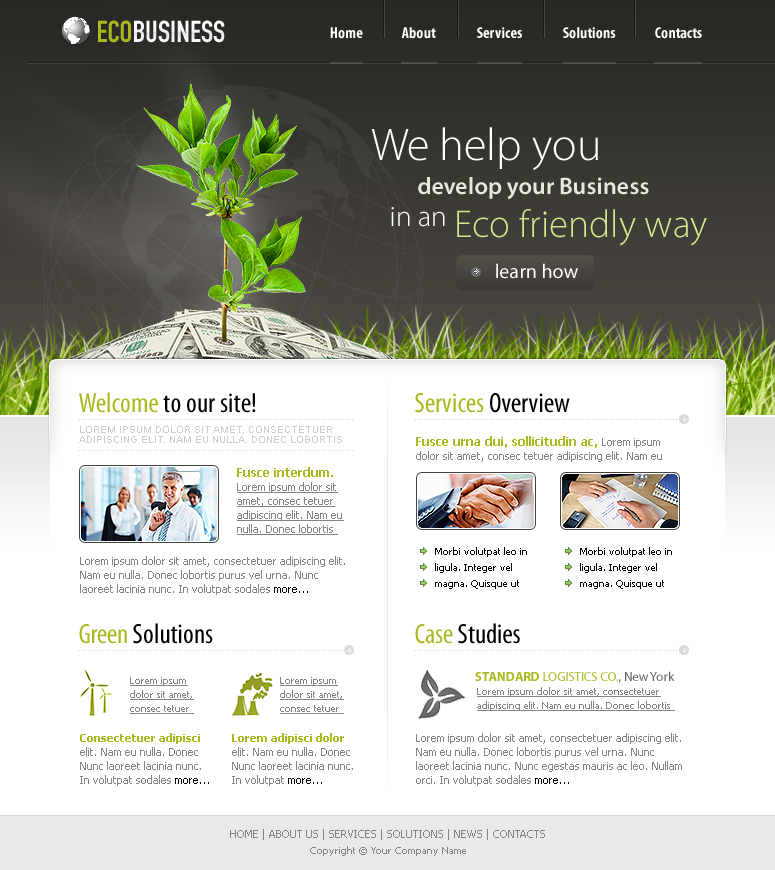
<style>
.page{position:relative;width:775px;height:870px;background:#ffffff}
.page>*{position:absolute;margin:0}
.t1{font:30px "DINEngschriftStd";color:#ffffff}
.t2{font:30px "DINEngschriftStd";color:#abb820}
.t3{font:16px "MyriadPro-BoldCond";color:#ffffff}
.t4{font:46px "MyriadPro-Light";color:#ffffff}
.t5{font:24px "MyriadPro-Semibold";color:#e7eada}
.t6{font:29px "MyriadPro-Light";color:#ffffff}
.t7{font:39px "MyriadPro-Light";color:#d5e88e}
.t8{font:20px "MyriadPro-Regular";color:#ffffff}
.t9{font:28px "MyriadPro-Cond";color:#000000}
.t10{font:28px "MyriadPro-Cond";color:#abb820}
.t11{font:10px "ArialMT";color:#cdcdcd;text-transform:uppercase}
.t12{font:11px/14px "Tahoma";color:#848484}
.t13{font:12px/14px "Tahoma-Bold";color:#abb820}
.t14{font:11px/14px "Tahoma";color:#848484;text-decoration:underline}
.t15{font:11px/14px "Tahoma";color:#000000}
.t16{font:10px/16px "Tahoma";color:#000000}
.t17{font:10px/14px "Tahoma";color:#848484;text-decoration:underline}
.t18{font:13px "MyriadPro-Regular";color:#abb820}
.t19{font:13px "MyriadPro-Bold";color:#abb820}
.t20{font:13px "MyriadPro-Regular";color:#606060}
.t21{font:11px/14px "Tahoma-Bold";color:#abb820}
.t22{font:11px/16px "Tahoma";color:#848484}
.t23{font:10px/16px "Tahoma";color:#848484}
</style>
<div class="page">
<p class="t1" style="left:98px;top:20px;width:127px;height:23px"><span class="t2">ECO</span>BUSINESS</p>
<p class="t3" style="left:330px;top:27px;width:33px;height:12px">Home</p>
<p class="t3" style="left:401px;top:27px;width:35px;height:12px">About</p>
<p class="t3" style="left:477px;top:27px;width:45px;height:11px">Services</p>
<p class="t3" style="left:563px;top:27px;width:53px;height:12px">Solutions</p>
<p class="t3" style="left:655px;top:27px;width:47px;height:12px">Contacts</p>
<p class="t4" style="left:371px;top:127px;width:227px;height:43px">We help you</p>
<p class="t5" style="left:418px;top:177px;width:231px;height:23px">develop your Business</p>
<p class="t6" style="left:391px;top:207px;width:54px;height:20px">in an</p>
<p class="t7" style="left:457px;top:209px;width:250px;height:37px">Eco friendly way</p>
<p class="t8" style="left:496px;top:263px;width:82px;height:16px">learn how</p>
<p class="t9" style="left:79px;top:392px;width:177px;height:21px"><span class="t10">Welcome </span>to our site!</p>
<p class="t10" style="left:415px;top:393px;width:155px;height:20px">Services <span class="t9">Overview</span></p>
<p class="t11" style="left:79px;top:426px;width:263px;height:17px">LOREM IPSUM DOLOR SIT AMET, CONSECTETUER ADIPISCING ELIT. NAM EU NULLA. DONEC LOBORTIS</p>
<p class="t12" style="left:416px;top:436px;width:246px;height:26px"><span class="t13">Fusce urna dui, sollicitudin ac, </span>Lorem ipsum dolor sit amet, consec tetuer adipiscing elit. Nam eu</p>
<p class="t14" style="left:237px;top:467px;width:107px;height:68px"><span class="t13">Fusce interdum. <br></span>Lorem ipsum dolor sit amet, consec tetuer adipiscing elit. Nam eu nulla. Donec lobortis</p>
<p class="t12" style="left:80px;top:556px;width:265px;height:39px">Lorem ipsum dolor sit amet, consectetuer adipiscing elit. Nam eu nulla. Donec lobortis purus vel urna. Nunc laoreet lacinia nunc. In volutpat sodales <span class="t15">more...</span></p>
<p class="t16" style="left:435px;top:547px;width:92px;height:42px">Morbi volutpat leo in ligula. Integer vel magna. Quisque ut</p>
<p class="t16" style="left:580px;top:547px;width:92px;height:42px">Morbi volutpat leo in ligula. Integer vel magna. Quisque ut</p>
<p class="t9" style="left:79px;top:623px;width:134px;height:21px"><span class="t10">Green </span>Solutions</p>
<p class="t9" style="left:415px;top:623px;width:105px;height:21px"><span class="t10">Case </span>Studies</p>
<p class="t17" style="left:130px;top:677px;width:64px;height:37px">Lorem ipsum dolor sit amet, consec tetuer</p>
<p class="t17" style="left:280px;top:677px;width:64px;height:37px">Lorem ipsum dolor sit amet, consec tetuer</p>
<p class="t18" style="left:475px;top:671px;width:200px;height:12px"><span class="t19">STANDARD</span> LOGISTICS CO.<span class="t20">, New York</span></p>
<p class="t17" style="left:477px;top:687px;width:198px;height:24px">Lorem ipsum dolor sit amet, consectetuer adipiscing elit. Nam eu nulla. Donec lobortis</p>
<p class="t12" style="left:80px;top:733px;width:129px;height:53px"><span class="t21">Consectetuer adipisci </span>elit. Nam eu nulla. Donec Nunc laoreet lacinia nunc. In volutpat sodales <span class="t15">more...</span></p>
<p class="t12" style="left:232px;top:733px;width:121px;height:53px"><span class="t21">Lorem adipisci dolor<br></span>elit. Nam eu nulla. Donec Nunc laoreet lacinia nunc. In volutpat <span class="t15">more...</span></p>
<p class="t12" style="left:416px;top:733px;width:266px;height:53px">Lorem ipsum dolor sit amet, consectetuer adipiscing elit. Nam eu nulla. Donec lobortis purus vel urna. Nunc laoreet lacinia nunc. Nunc egestas mauris ac leo. Nullam orci. In volutpat sodales <span class="t15">more...</span></p>
<p class="t22" style="left:230px;top:829px;width:315px;height:27px;text-align:center">HOME | ABOUT US | SERVICES | SOLUTIONS | NEWS | CONTACTS<br><span class="t23">Copyright © Your Company Name</span></p>
</div>
